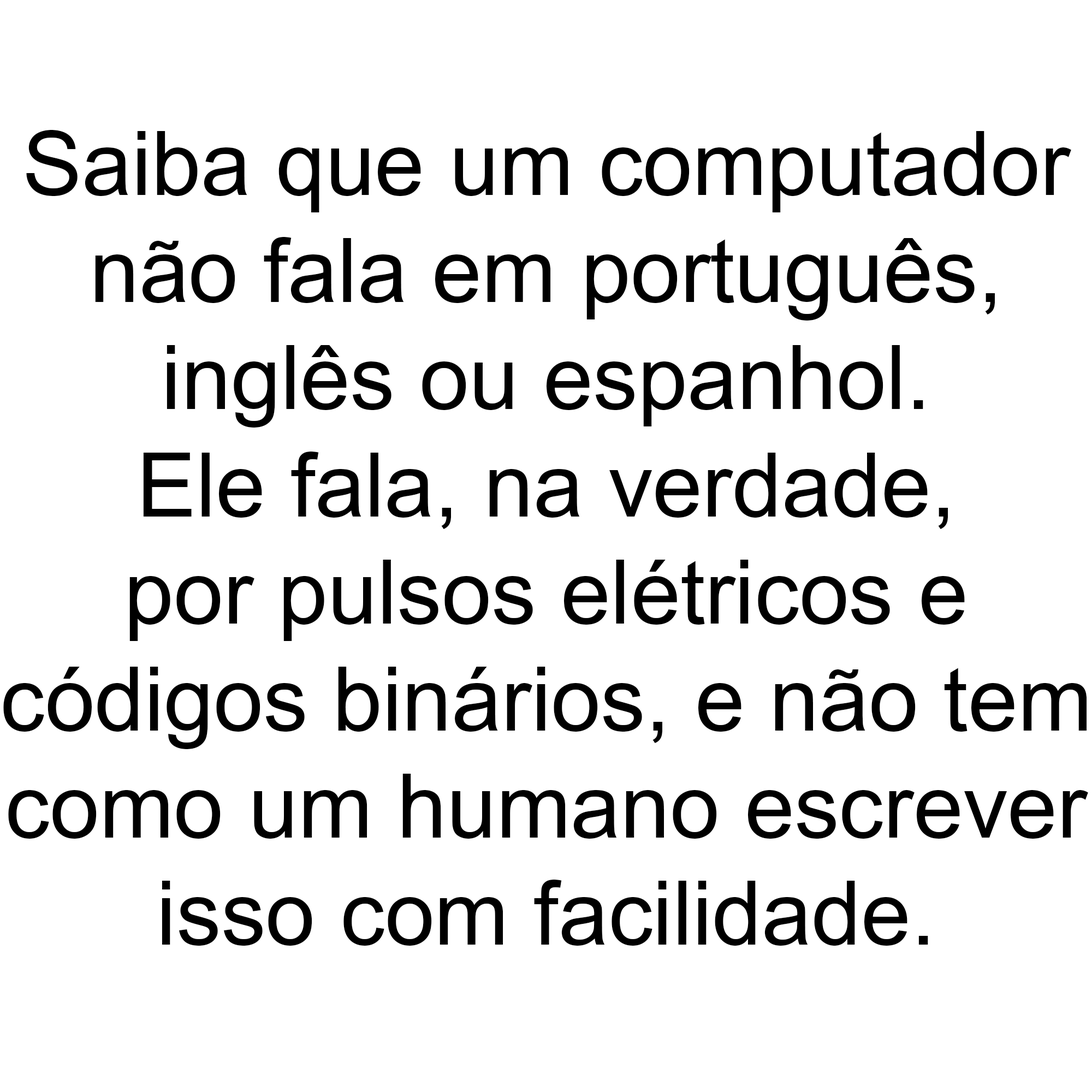
<style>
.page{position:relative;width:1092px;height:1092px;background:#ffffff}
.page>*{position:absolute;margin:0}
.t1{font:89.2px "ArialMT";color:#000000}
</style>
<div class="page">
<p class="t1" style="left:3px;top:130px;width:1085px;height:816px;text-align:center">Saiba que um computador<br>não fala em português,<br>inglês ou espanhol.<br>Ele fala, na verdade,<br>por pulsos elétricos e<br>códigos binários, e não tem<br>como um humano escrever<br>isso com facilidade.</p>
</div>
